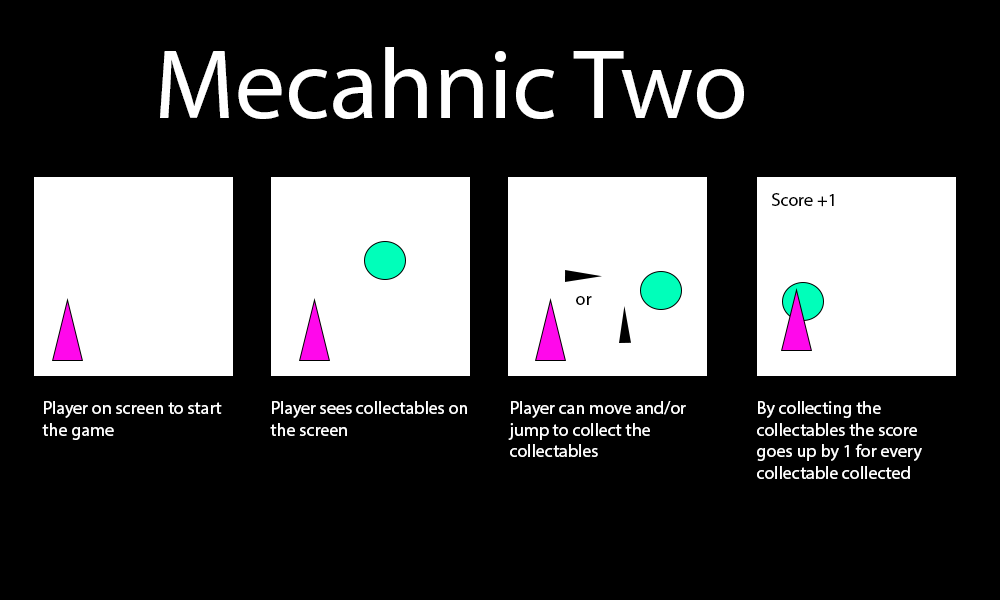
<style>
.page{position:relative;width:1000px;height:600px;background:#000000}
.page>*{position:absolute;margin:0}
.t1{font:100px "MyriadPro-Regular";color:#ffffff}
.t2{font:18px "MyriadPro-Regular";color:#000000}
.t3{font:18px "MyriadPro-Regular";color:#ffffff}
</style>
<div class="page">
<p class="t1" style="left:160px;top:47px;width:584px;height:72px">Mecahnic Two</p>
<p class="t2" style="left:772px;top:193px;width:62px;height:14px">Score +1</p>
<p class="t2" style="left:576px;top:296px;width:16px;height:9px">or</p>
<p class="t3" style="left:42px;top:401px;width:180px;height:39px">Player on screen to start the game</p>
<p class="t3" style="left:270px;top:401px;width:197px;height:35px">Player sees collectables on the screen</p>
<p class="t3" style="left:508px;top:401px;width:178px;height:56px">Player can move and/or jump to collect the collectables</p>
<p class="t3" style="left:757px;top:401px;width:165px;height:78px">By collecting the collectables the score goes up by 1 for every collectable collected</p>
</div>
